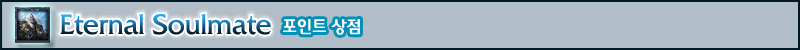
<style>
.page{position:relative;width:800px;height:50px;background:#b2bec7}
.page>*{position:absolute;margin:0}
.t1{font:28px "2002L";letter-spacing:-0.025em}
.t2{font:18px "2002L";letter-spacing:-0.025em;color:#ffffff}
</style>
<div class="page">
<p class="t1" style="left:60px;top:13px;width:211px;height:22px">Eternal Soulmate</p>
<p class="t2" style="left:283px;top:19px;width:77px;height:16px">포인트 상점</p>
</div>
